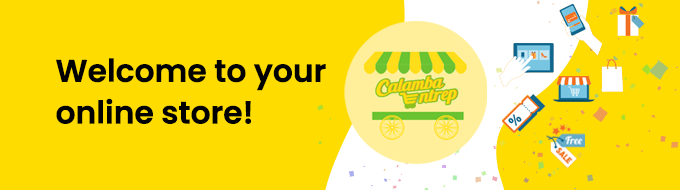
<style>
.page{position:relative;width:680px;height:190px;background:#fedc00}
.page>*{position:absolute;margin:0}
.t1{font:31.2px/41.7px "Poppins-SemiBold";letter-spacing:-0.025em;color:#000000;font-weight:bold}
</style>
<div class="page">
<p class="t1" style="left:56px;top:58px;width:270px;height:66px">Welcome to your<br>online store!</p>
</div>
